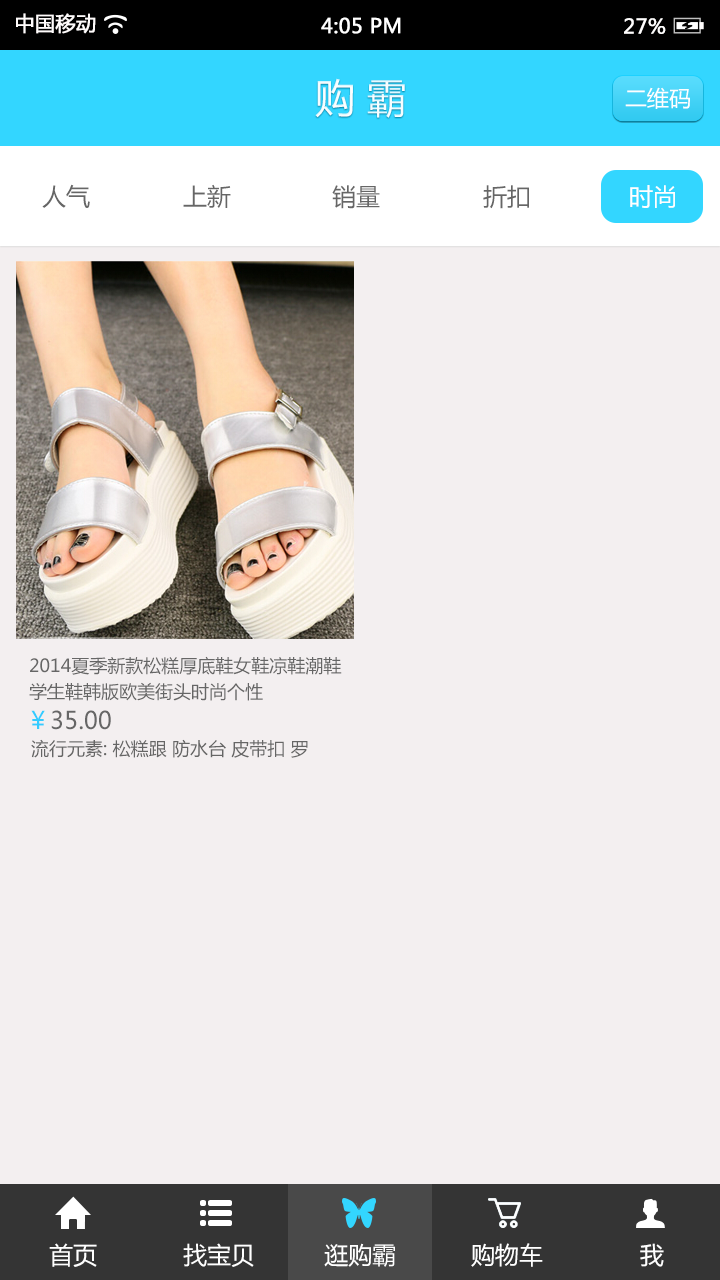
<style>
.page{position:relative;width:720px;height:1280px;background:#f3eff0}
.page>*{position:absolute;margin:0}
.t1{font:20px "MicrosoftYaHei";color:#fffcfc;font-weight:bold}
.t2{font:20px "MicrosoftYaHei";color:#ffffff;font-weight:bold}
.t3{font:20px "MicrosoftYaHei";color:#fffefe;font-weight:bold}
.t4{font:40px "MicrosoftYaHei";color:#ffffff}
.t5{font:22px "MicrosoftYaHei";color:#ffffff}
.t6{font:24px "MicrosoftYaHei";color:#666666}
.t7{font:24px "MicrosoftYaHei";color:#ffffff}
.t8{font:18px/26px "MicrosoftYaHei";color:#666666}
.t9{font:24px "MicrosoftYaHei";color:#33ccff}
.t10{font:18px "MicrosoftYaHei";color:#666666}
</style>
<div class="page">
<p class="t1" style="left:16px;top:13px;width:80px;height:21px">中国移动</p>
<p class="t2" style="left:321px;top:17px;width:80px;height:17px">4:05 PM</p>
<p class="t3" style="left:624px;top:18px;width:42px;height:16px">27%</p>
<p class="t4" style="left:315px;top:78px;width:90px;height:40px">购 霸</p>
<p class="t5" style="left:625px;top:87px;width:65px;height:22px">二维码</p>
<p class="t6" style="left:42px;top:184px;width:48px;height:24px">人气</p>
<p class="t6" style="left:183px;top:184px;width:48px;height:24px">上新</p>
<p class="t6" style="left:332px;top:185px;width:48px;height:24px">销量</p>
<p class="t6" style="left:483px;top:185px;width:46px;height:24px">折扣</p>
<p class="t7" style="left:630px;top:185px;width:45px;height:23px">时尚</p>
<p class="t8" style="left:29px;top:656px;width:313px;height:45px">2014夏季新款松糕厚底鞋女鞋凉鞋潮鞋<br>学生鞋韩版欧美街头时尚个性</p>
<p class="t6" style="left:31px;top:710px;width:80px;height:20px"><span class="t9">￥</span>35.00</p>
<p class="t10" style="left:31px;top:739px;width:277px;height:19px">流行元素: 松糕跟 防水台 皮带扣 罗</p>
<p class="t7" style="left:49px;top:1243px;width:48px;height:24px">首页</p>
<p class="t7" style="left:183px;top:1243px;width:71px;height:24px">找宝贝</p>
<p class="t7" style="left:324px;top:1243px;width:71px;height:24px">逛购霸</p>
<p class="t7" style="left:471px;top:1243px;width:72px;height:24px">购物车</p>
<p class="t7" style="left:640px;top:1243px;width:24px;height:24px">我</p>
</div>
